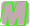
<style>
.page{position:relative;width:30px;height:26px;background:#c0acae}
.page>*{position:absolute;margin:0}
.t1{font:24px "AgentOrange";letter-spacing:0.05em;color:#33f310;font-style:italic}
</style>
<div class="page">
<p class="t1" style="left:0px;top:1px;width:28px;height:27px">M</p>
</div>
